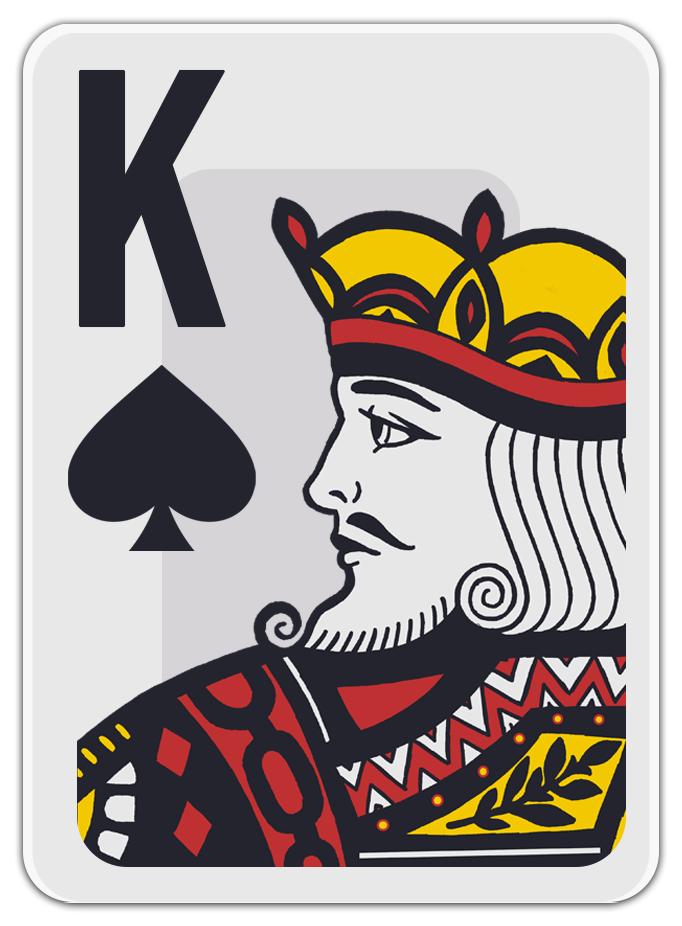
<style>
.page{position:relative;width:682px;height:926px;background:#e8e8e8}
.page>*{position:absolute;margin:0}
.t1{font:363.9px "BebasNeue-Regular";color:#24242e;text-transform:uppercase;font-weight:bold;scale:1.1 1}
</style>
<div class="page">
<p class="t1" style="left:78px;top:69px;width:148px;height:259px">K</p>
</div>
